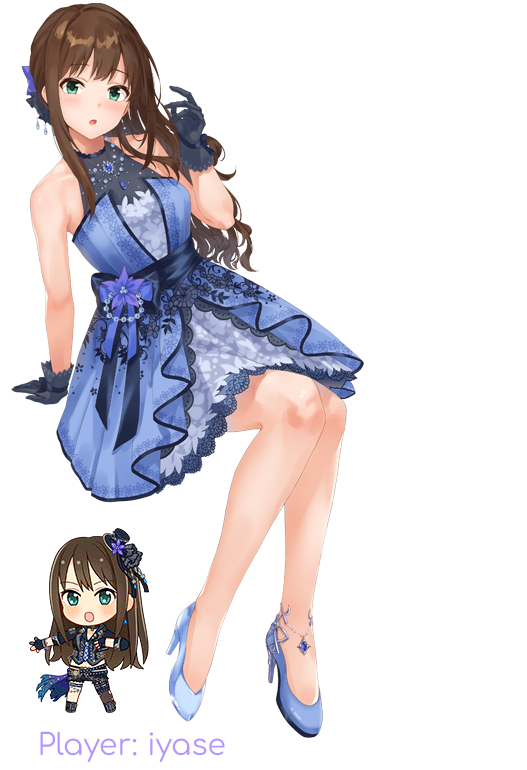
<style>
.page{position:relative;width:527px;height:770px;background:#ffffff}
.page>*{position:absolute;margin:0}
.t1{font:29.8px "Comfortaa-Regular";color:#b497fe}
</style>
<div class="page">
<p class="t1" style="left:40px;top:731px;width:185px;height:31px">Player: iyase</p>
</div>
